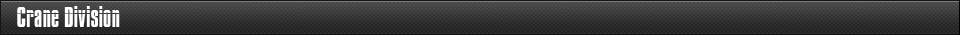
<style>
.page{position:relative;width:960px;height:35px}
.page>*{position:absolute;margin:0}
.t1{font:25px "Impossible";color:#ffffff}
</style>
<div class="page">
<p class="t1" style="left:17px;top:6px;width:103px;height:21px">Crane Division</p>
</div>
